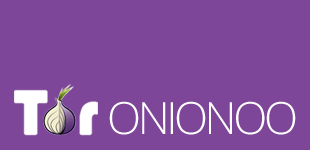
<style>
.page{position:relative;width:310px;height:150px;background:#7d4698}
.page>*{position:absolute;margin:0}
.t1{font:44.4px "OpenSans-Light";letter-spacing:-0.07em;color:#ffffff}
</style>
<div class="page">
<p class="t1" style="left:109px;top:101px;width:187px;height:34px">ONIONOO</p>
</div>
